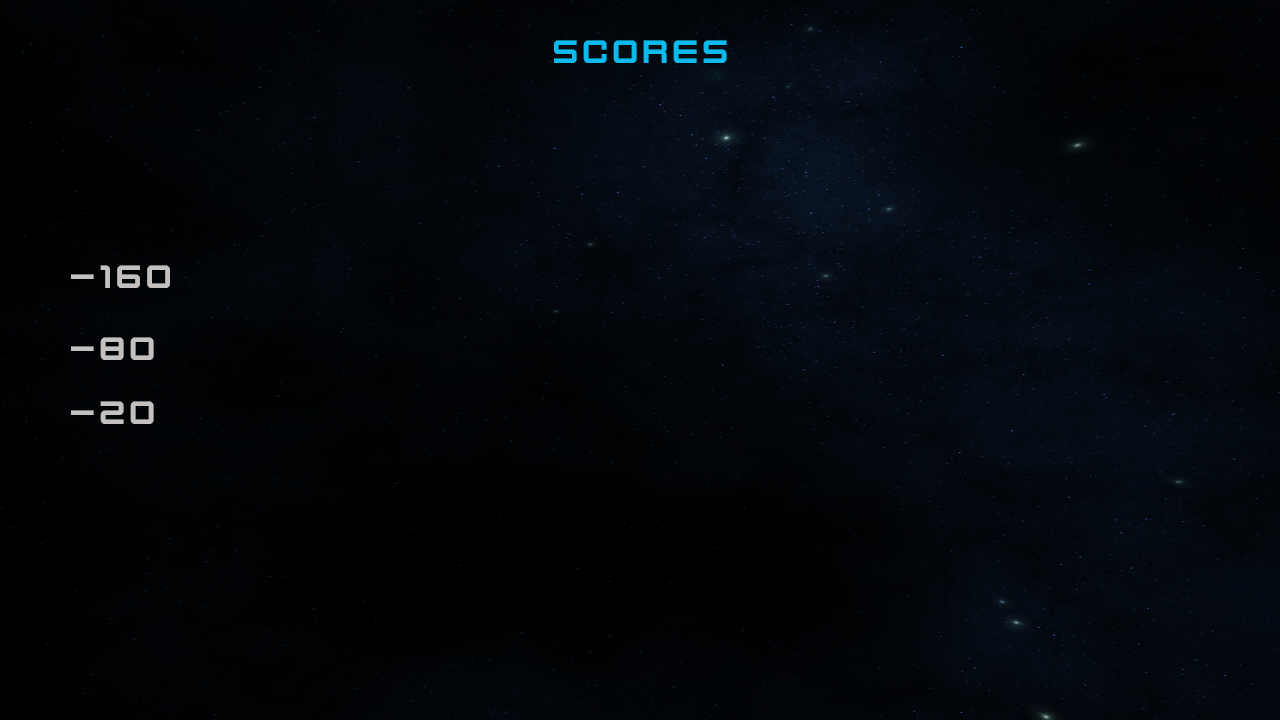
<style>
.page{position:relative;width:1280px;height:720px}
.page>*{position:absolute;margin:0}
.t1{font:36px "KenVector-Future";color:#0bbaec}
.t2{font:36px "KenVector-Future";color:#c5c0c0}
</style>
<div class="page">
<p class="t1" style="left:553px;top:40px;width:174px;height:23px">scores</p>
<p class="t2" style="left:71px;top:265px;width:99px;height:23px">-160</p>
<p class="t2" style="left:71px;top:337px;width:83px;height:23px">-80</p>
<p class="t2" style="left:71px;top:401px;width:83px;height:23px">-20</p>
</div>
